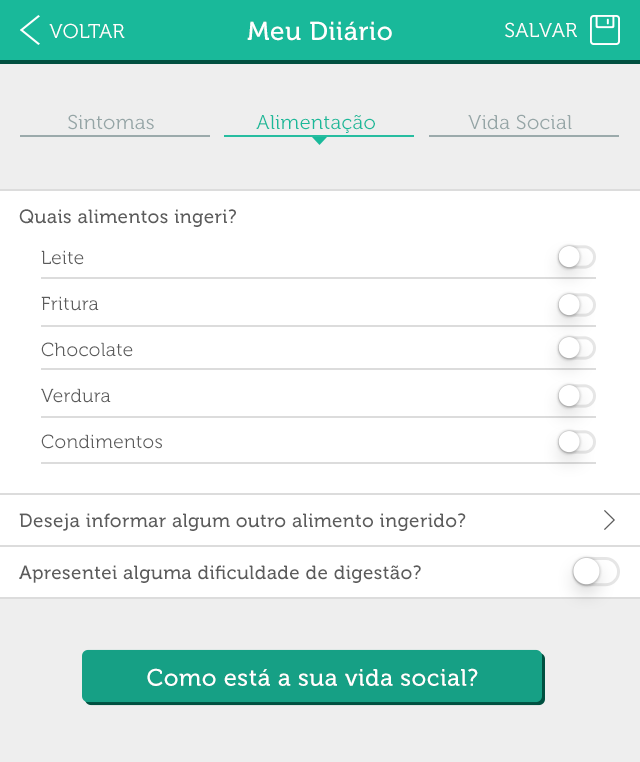
<style>
.page{position:relative;width:640px;height:762px;background:#ffffff}
.page>*{position:absolute;margin:0}
.t1{font:20px "Museo300-Regular";letter-spacing:0.02em;color:#ffffff;text-transform:uppercase}
.t2{font:26px "Museo500-Regular";letter-spacing:0.02em;color:#ffffff}
.t3{font:20px "Museo300-Regular";letter-spacing:0.02em;color:#95a5a6}
.t4{font:20px "Museo300-Regular";letter-spacing:0.02em;color:#19b99a}
.t5{font:19px "Museo500-Regular";letter-spacing:0.02em;color:#5c5c5c}
.t6{font:19px/46px "Museo300-Regular";letter-spacing:0.02em;color:#5c5c5c}
.t7{font:23.8px "Museo500-Regular";letter-spacing:0.02em;color:#ffffff}
</style>
<div class="page">
<p class="t1" style="left:49px;top:23px;width:76px;height:16px">Voltar</p>
<p class="t2" style="left:247px;top:21px;width:145px;height:20px">Meu Diiário</p>
<p class="t1" style="left:505px;top:22px;width:72px;height:16px">SALVAR</p>
<p class="t3" style="left:68px;top:114px;width:86px;height:16px">Sintomas</p>
<p class="t4" style="left:256px;top:115px;width:119px;height:18px">Alimentação</p>
<p class="t3" style="left:468px;top:114px;width:104px;height:16px">Vida Social</p>
<p class="t5" style="left:19px;top:209px;width:217px;height:18px">Quais alimentos ingeri?</p>
<p class="t6" style="left:41px;top:250px;width:121px;height:199px">Leite<br>Fritura<br>Chocolate<br>Verdura<br>Condimentos</p>
<p class="t5" style="left:19px;top:513px;width:447px;height:18px">Deseja informar algum outro alimento ingerido?</p>
<p class="t5" style="left:19px;top:565px;width:402px;height:18px">Apresentei alguma dificuldade de digestão?</p>
<p class="t7" style="left:147px;top:668px;width:331px;height:18px">Como está a sua vida social?</p>
</div>
